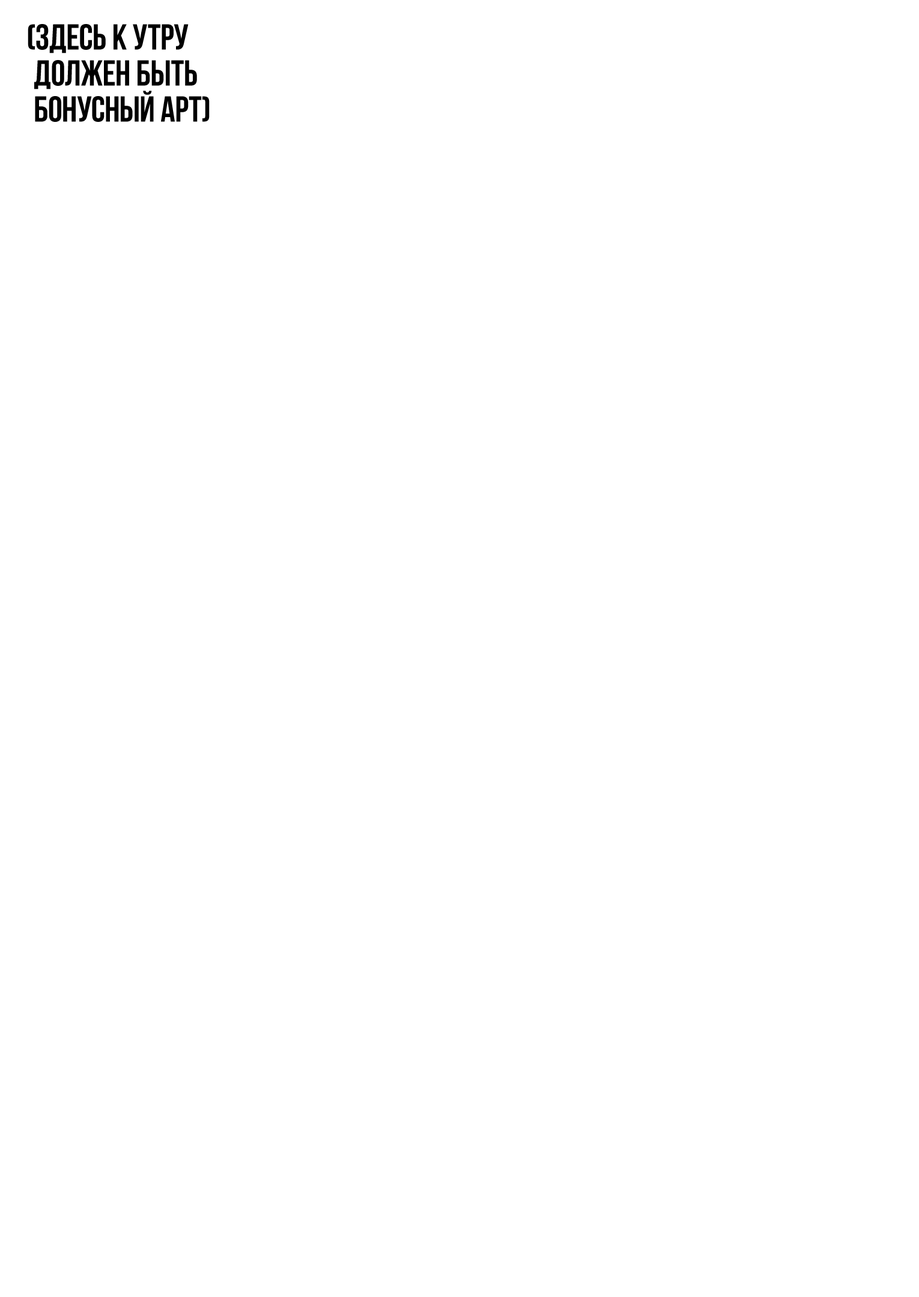
<style>
.page{position:relative;width:919px;height:1297px;background:#ffffff}
.page>*{position:absolute;margin:0}
.t1{font:36px "Adderley-Bold";color:#000000}
</style>
<div class="page">
<p class="t1" style="left:28px;top:24px;width:182px;height:98px">(здесь к утру<br>должен быть <br>бонусный арт)</p>
</div>
